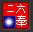
<style>
.page{position:relative;width:33px;height:32px;background:#f20000}
.page>*{position:absolute;margin:0}
.t1{font:10.4px "SimSun";color:#ffffff}
.t2{font:11.7px "SimSun";color:#ffffff}
</style>
<div class="page">
<p class="t1" style="left:7px;top:4px;width:18px;height:9px">二六</p>
<p class="t2" style="left:16px;top:15px;width:11px;height:12px">奉</p>
</div>
